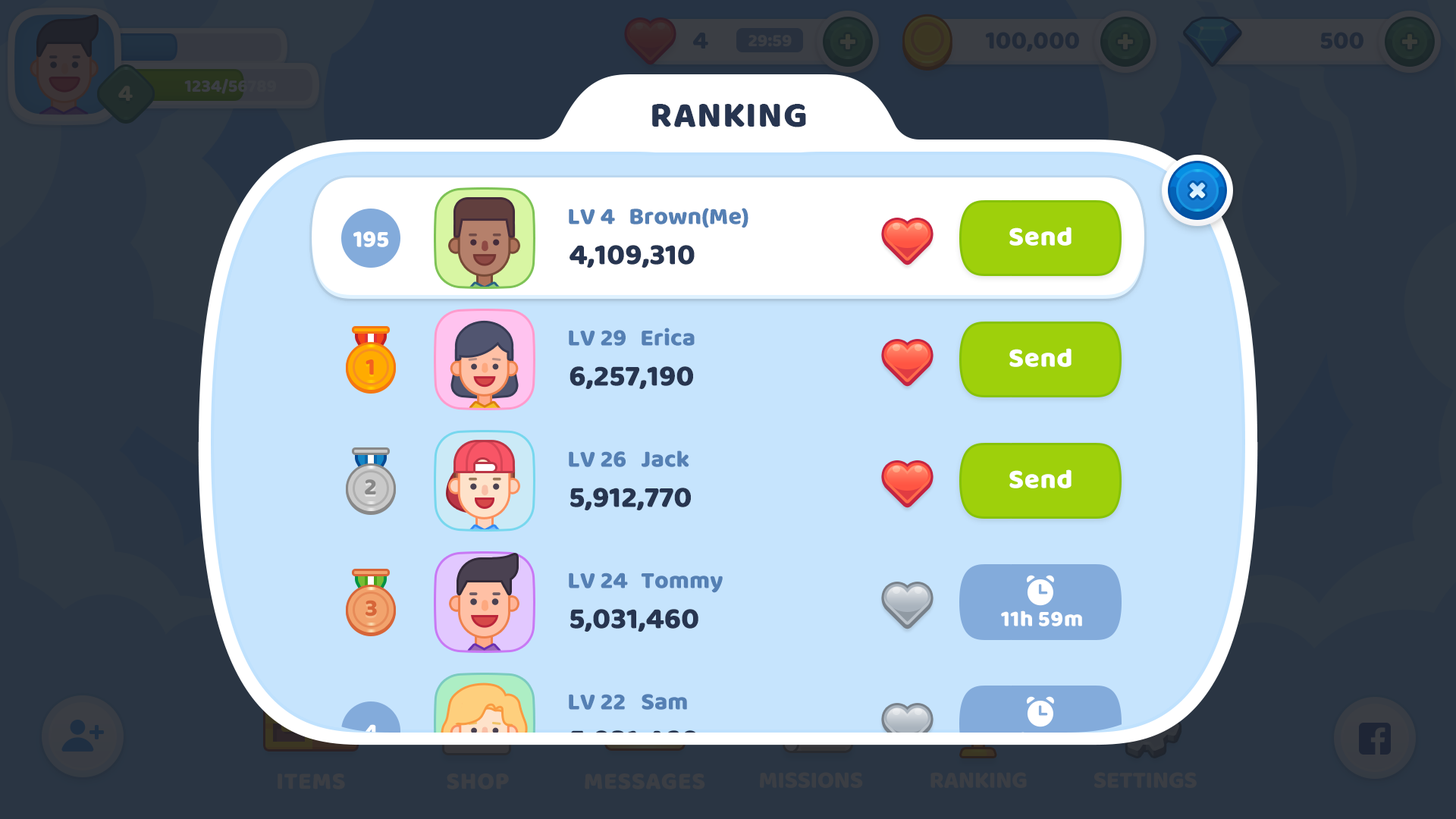
<style>
.page{position:relative;width:1456px;height:819px;background:#c6e4fd}
.page>*{position:absolute;margin:0}
.t1{font:36.4px "BalooBhaijaan-Regular";color:#273550;text-transform:uppercase}
.t2{font:24.3px "BalooBhaijaan-Regular";color:#5580b4}
.t3{font:24.3px "BalooBhaijaan-Regular";color:#ffffff}
.t4{font:27.3px "BalooBhaijaan-Regular";color:#ffffff}
.t5{font:30.3px "BalooBhaijaan-Regular";color:#273550}
.t6{font:24.3px "BalooBhaijaan-Regular";color:#f3611e}
.t7{font:24.3px "BalooBhaijaan-Regular";color:#888888}
.t8{font:24.3px "BalooBhaijaan-Regular";color:#d76639}
.t9{font:22.7px "BalooBhaijaan-Regular";color:#ffffff}
</style>
<div class="page">
<p class="t1" style="left:652px;top:104px;width:154px;height:23px">Ranking</p>
<p class="t2" style="left:569px;top:209px;width:46px;height:15px">LV 4</p>
<p class="t2" style="left:630px;top:208px;width:118px;height:20px">Brown(Me)</p>
<p class="t3" style="left:353px;top:231px;width:36px;height:16px">195</p>
<p class="t4" style="left:1009px;top:227px;width:63px;height:19px">Send</p>
<p class="t5" style="left:570px;top:245px;width:125px;height:23px">4,109,310</p>
<p class="t2" style="left:569px;top:330px;width:57px;height:16px">LV 29</p>
<p class="t2" style="left:642px;top:328px;width:53px;height:18px">Erica</p>
<p class="t4" style="left:1009px;top:348px;width:63px;height:19px">Send</p>
<p class="t6" style="left:366px;top:362px;width:8px;height:15px">1</p>
<p class="t6" style="left:366px;top:359px;width:8px;height:16px">1</p>
<p class="t5" style="left:570px;top:366px;width:123px;height:23px">6,257,190</p>
<p class="t2" style="left:569px;top:451px;width:57px;height:16px">LV 26</p>
<p class="t2" style="left:642px;top:450px;width:47px;height:17px">Jack</p>
<p class="t4" style="left:1009px;top:469px;width:63px;height:19px">Send</p>
<p class="t7" style="left:365px;top:479px;width:11px;height:15px">2</p>
<p class="t5" style="left:570px;top:488px;width:121px;height:22px">5,912,770</p>
<p class="t2" style="left:569px;top:573px;width:59px;height:15px">LV 24</p>
<p class="t2" style="left:641px;top:573px;width:82px;height:20px">Tommy</p>
<p class="t8" style="left:366px;top:600px;width:11px;height:17px">3</p>
<p class="t5" style="left:570px;top:609px;width:128px;height:23px">5,031,460</p>
<p class="t9" style="left:1001px;top:610px;width:81px;height:16px">11h 59m</p>
<p class="t2" style="left:569px;top:694px;width:56px;height:16px">LV 22</p>
<p class="t2" style="left:642px;top:694px;width:45px;height:16px">Sam</p>
<p class="t3" style="left:364px;top:724px;width:14px;height:16px">4</p>
</div>
